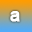
<style>
.page{position:relative;width:32px;height:32px}
.page>*{position:absolute;margin:0}
.t1{font:18px "ArialMT";color:#ffffff;font-weight:bold}
</style>
<div class="page">
<p class="t1" style="left:10px;top:11px;width:10px;height:11px">a</p>
</div>
